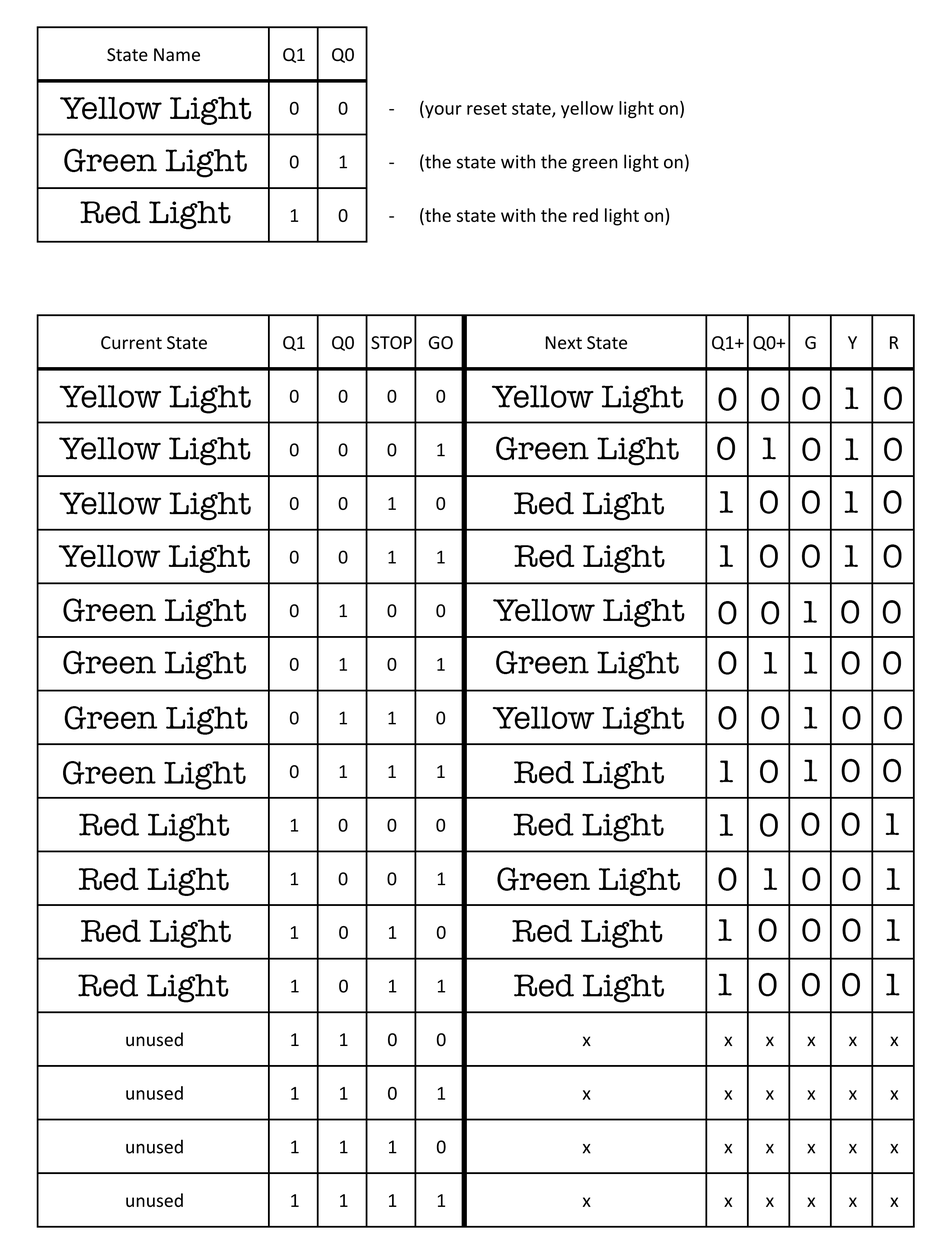
<style>
.page{position:relative;width:951px;height:1254px;background:#ffffff}
.page>*{position:absolute;margin:0}
.t1{font:32.4px "AmericanTypewriter";color:#000000}
</style>
<div class="page">
<p class="t1" style="left:60px;top:97px;width:191px;height:28px">Yellow Light</p>
<p class="t1" style="left:64px;top:149px;width:183px;height:28px">Green Light</p>
<p class="t1" style="left:80px;top:201px;width:150px;height:28px">Red Light</p>
<p class="t1" style="left:60px;top:385px;width:191px;height:28px">Yellow Light</p>
<p class="t1" style="left:492px;top:385px;width:191px;height:28px">Yellow Light</p>
<p class="t1" style="left:719px;top:387px;width:18px;height:24px">0</p>
<p class="t1" style="left:761px;top:387px;width:18px;height:24px">0</p>
<p class="t1" style="left:802px;top:386px;width:19px;height:24px">0</p>
<p class="t1" style="left:845px;top:387px;width:14px;height:22px">1</p>
<p class="t1" style="left:884px;top:386px;width:18px;height:24px">0</p>
<p class="t1" style="left:59px;top:437px;width:191px;height:28px">Yellow Light</p>
<p class="t1" style="left:496px;top:437px;width:183px;height:28px">Green Light</p>
<p class="t1" style="left:717px;top:437px;width:18px;height:23px">0</p>
<p class="t1" style="left:763px;top:438px;width:13px;height:21px">1</p>
<p class="t1" style="left:802px;top:438px;width:19px;height:23px">0</p>
<p class="t1" style="left:884px;top:438px;width:18px;height:23px">0</p>
<p class="t1" style="left:845px;top:438px;width:14px;height:22px">1</p>
<p class="t1" style="left:60px;top:492px;width:191px;height:28px">Yellow Light</p>
<p class="t1" style="left:514px;top:492px;width:150px;height:28px">Red Light</p>
<p class="t1" style="left:720px;top:491px;width:13px;height:22px">1</p>
<p class="t1" style="left:760px;top:490px;width:18px;height:24px">0</p>
<p class="t1" style="left:802px;top:490px;width:18px;height:24px">0</p>
<p class="t1" style="left:845px;top:491px;width:13px;height:22px">1</p>
<p class="t1" style="left:884px;top:490px;width:18px;height:24px">0</p>
<p class="t1" style="left:59px;top:545px;width:191px;height:28px">Yellow Light</p>
<p class="t1" style="left:514px;top:545px;width:150px;height:28px">Red Light</p>
<p class="t1" style="left:720px;top:545px;width:13px;height:22px">1</p>
<p class="t1" style="left:760px;top:544px;width:18px;height:24px">0</p>
<p class="t1" style="left:802px;top:544px;width:18px;height:24px">0</p>
<p class="t1" style="left:845px;top:545px;width:13px;height:22px">1</p>
<p class="t1" style="left:884px;top:544px;width:18px;height:24px">0</p>
<p class="t1" style="left:63px;top:598px;width:183px;height:29px">Green Light</p>
<p class="t1" style="left:493px;top:599px;width:191px;height:28px">Yellow Light</p>
<p class="t1" style="left:719px;top:601px;width:18px;height:23px">0</p>
<p class="t1" style="left:761px;top:601px;width:18px;height:23px">0</p>
<p class="t1" style="left:804px;top:601px;width:13px;height:22px">1</p>
<p class="t1" style="left:841px;top:600px;width:18px;height:23px">0</p>
<p class="t1" style="left:883px;top:600px;width:18px;height:23px">0</p>
<p class="t1" style="left:63px;top:651px;width:183px;height:28px">Green Light</p>
<p class="t1" style="left:496px;top:651px;width:183px;height:28px">Green Light</p>
<p class="t1" style="left:719px;top:651px;width:18px;height:23px">0</p>
<p class="t1" style="left:764px;top:652px;width:13px;height:22px">1</p>
<p class="t1" style="left:804px;top:652px;width:14px;height:22px">1</p>
<p class="t1" style="left:842px;top:651px;width:18px;height:23px">0</p>
<p class="t1" style="left:883px;top:651px;width:18px;height:23px">0</p>
<p class="t1" style="left:64px;top:706px;width:183px;height:29px">Green Light</p>
<p class="t1" style="left:493px;top:706px;width:191px;height:29px">Yellow Light</p>
<p class="t1" style="left:719px;top:706px;width:18px;height:23px">0</p>
<p class="t1" style="left:761px;top:706px;width:18px;height:23px">0</p>
<p class="t1" style="left:804px;top:707px;width:14px;height:21px">1</p>
<p class="t1" style="left:843px;top:706px;width:18px;height:23px">0</p>
<p class="t1" style="left:884px;top:706px;width:18px;height:23px">0</p>
<p class="t1" style="left:63px;top:761px;width:183px;height:28px">Green Light</p>
<p class="t1" style="left:514px;top:761px;width:150px;height:28px">Red Light</p>
<p class="t1" style="left:720px;top:760px;width:13px;height:22px">1</p>
<p class="t1" style="left:760px;top:760px;width:18px;height:23px">0</p>
<p class="t1" style="left:804px;top:760px;width:14px;height:21px">1</p>
<p class="t1" style="left:842px;top:759px;width:18px;height:23px">0</p>
<p class="t1" style="left:883px;top:759px;width:18px;height:23px">0</p>
<p class="t1" style="left:79px;top:813px;width:150px;height:28px">Red Light</p>
<p class="t1" style="left:514px;top:813px;width:150px;height:28px">Red Light</p>
<p class="t1" style="left:720px;top:814px;width:13px;height:22px">1</p>
<p class="t1" style="left:760px;top:813px;width:18px;height:24px">0</p>
<p class="t1" style="left:802px;top:812px;width:18px;height:24px">0</p>
<p class="t1" style="left:842px;top:812px;width:18px;height:24px">0</p>
<p class="t1" style="left:886px;top:813px;width:13px;height:22px">1</p>
<p class="t1" style="left:79px;top:868px;width:150px;height:28px">Red Light</p>
<p class="t1" style="left:497px;top:867px;width:183px;height:29px">Green Light</p>
<p class="t1" style="left:719px;top:867px;width:18px;height:24px">0</p>
<p class="t1" style="left:764px;top:868px;width:13px;height:22px">1</p>
<p class="t1" style="left:802px;top:867px;width:19px;height:24px">0</p>
<p class="t1" style="left:843px;top:867px;width:18px;height:24px">0</p>
<p class="t1" style="left:887px;top:868px;width:13px;height:22px">1</p>
<p class="t1" style="left:81px;top:920px;width:150px;height:28px">Red Light</p>
<p class="t1" style="left:512px;top:920px;width:150px;height:28px">Red Light</p>
<p class="t1" style="left:719px;top:919px;width:13px;height:22px">1</p>
<p class="t1" style="left:759px;top:918px;width:18px;height:24px">0</p>
<p class="t1" style="left:802px;top:918px;width:19px;height:24px">0</p>
<p class="t1" style="left:843px;top:918px;width:18px;height:24px">0</p>
<p class="t1" style="left:887px;top:919px;width:13px;height:22px">1</p>
<p class="t1" style="left:78px;top:974px;width:150px;height:28px">Red Light</p>
<p class="t1" style="left:514px;top:974px;width:150px;height:28px">Red Light</p>
<p class="t1" style="left:719px;top:974px;width:13px;height:21px">1</p>
<p class="t1" style="left:759px;top:973px;width:18px;height:23px">0</p>
<p class="t1" style="left:802px;top:973px;width:18px;height:23px">0</p>
<p class="t1" style="left:842px;top:973px;width:18px;height:23px">0</p>
<p class="t1" style="left:886px;top:974px;width:14px;height:21px">1</p>
</div>
